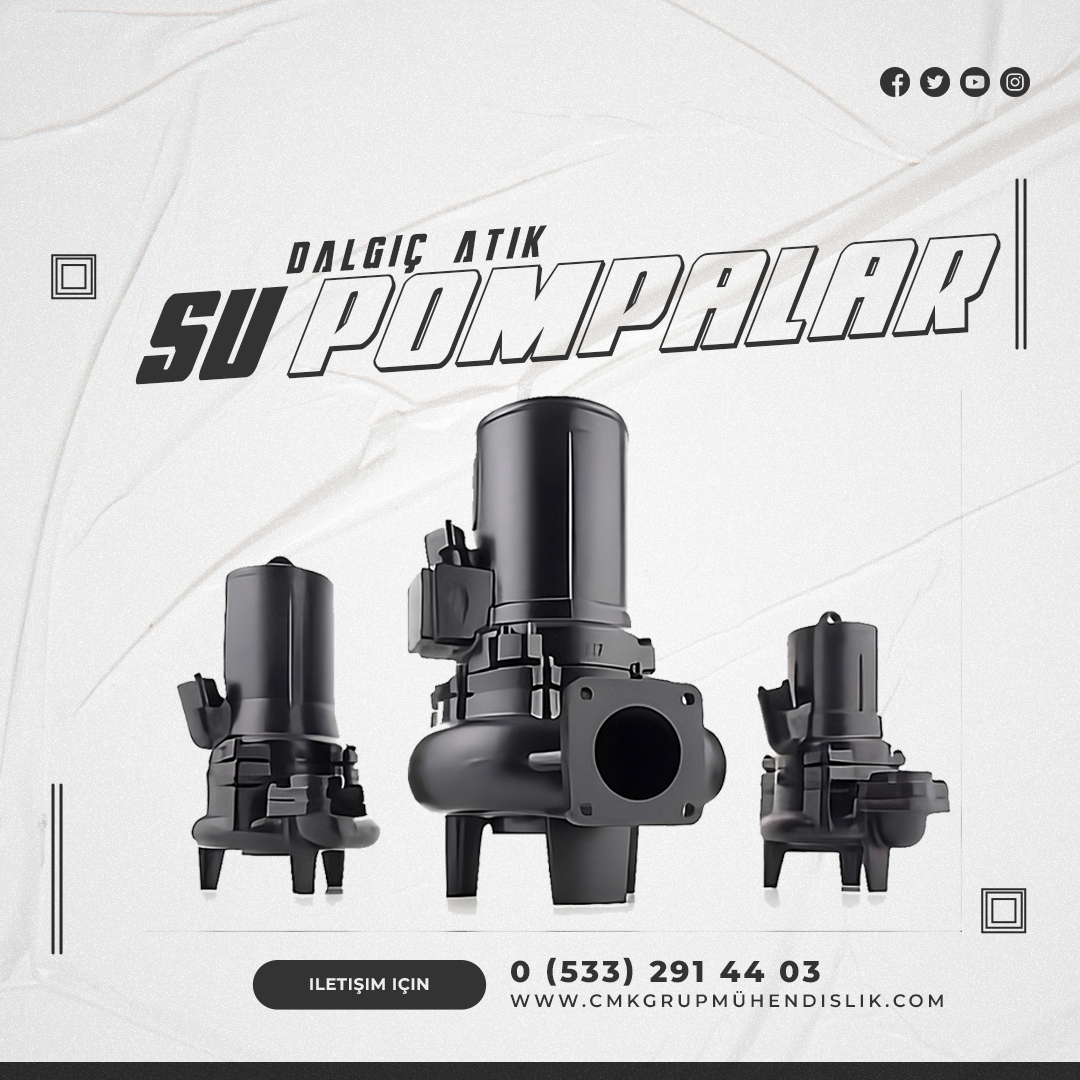
<style>
.page{position:relative;width:1080px;height:1080px}
.page>*{position:absolute;margin:0}
.t1{font:128.9px "PowerLord3DItalic";color:#333333}
.t2{font:45.3px "Bayformance-Italic";letter-spacing:0.15em;color:#333333;text-transform:uppercase}
.t3{font:125px "PowerLordCondensedItalic";color:#333333}
.t4{font:30px "Montserrat-ExtraBold";letter-spacing:0.1em;color:#333333;text-transform:uppercase}
.t5{font:16.7px "Montserrat-Bold";letter-spacing:0.025em;color:#ededed;text-transform:uppercase}
.t6{font:18px "Montserrat-SemiBold";letter-spacing:0.2em;color:#333333;text-transform:uppercase}
</style>
<div class="page">
<p class="t1" style="left:286px;top:233px;width:715px;height:146px;rotate:-4deg">pompalar</p>
<p class="t2" style="left:286px;top:225px;width:261px;height:49px;rotate:-4deg">dalgıç atık</p>
<p class="t3" style="left:135px;top:286px;width:154px;height:99px;rotate:-4deg">su</p>
<p class="t4" style="left:511px;top:957px;width:309px;height:29px">0 (533) 291 44 03</p>
<p class="t5" style="left:310px;top:978px;width:119px;height:16px">iletişim için</p>
<p class="t6" style="left:510px;top:991px;width:433px;height:17px">www.cmkgrupmühendislik.com</p>
</div>
